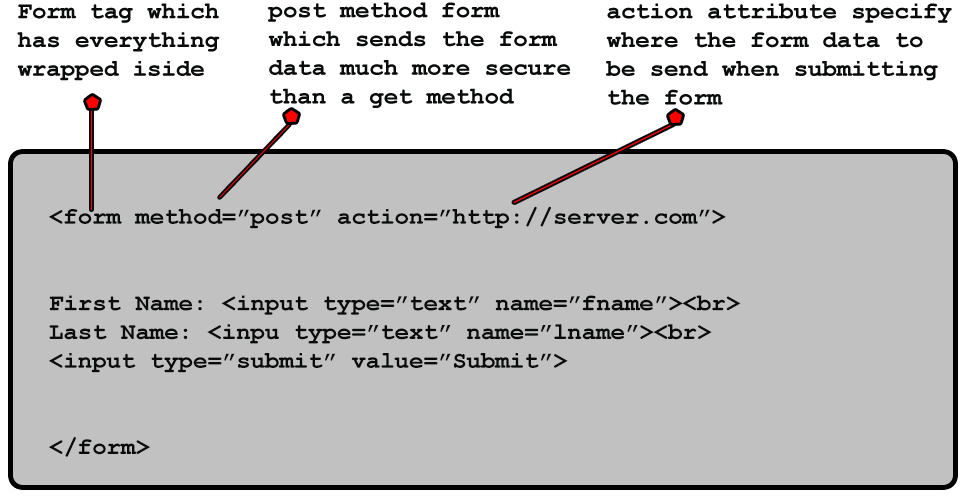
<style>
.page{position:relative;width:960px;height:500px;background:#c1c1c1}
.page>*{position:absolute;margin:0}
.t1{font:24px "CourierNewPS-BoldMT";color:#0a0b0b}
</style>
<div class="page">
<p class="t1" style="left:17px;top:3px;width:203px;height:78px">Form tag which has everything wrapped iside</p>
<p class="t1" style="left:268px;top:2px;width:302px;height:106px">post method form which sends the form data much more secure than a get method</p>
<p class="t1" style="left:606px;top:3px;width:346px;height:102px">action attribute specify where the form data to be send when submitting the form</p>
<p class="t1" style="left:48px;top:206px;width:693px;height:251px">&lt;form method=”post” action=”http://server.com”&gt;<br><br><br> First Name: &lt;input type=”text” name=”fname”&gt;&lt;br&gt;<br> Last Name: &lt;inpu type=”text” name=”lname”&gt;&lt;br&gt;<br> &lt;input type=”submit” value=”Submit”&gt;<br><br><br> &lt;/form&gt;</p>
</div>
